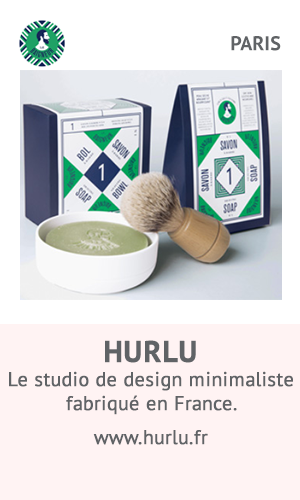
<style>
.page{position:relative;width:300px;height:500px;background:#fff3f3}
.page>*{position:absolute;margin:0}
.t1{font:20px "PTSans-Bold";color:#606366}
.t2{font:20px/24px "PTSans-Regular";color:#606366;font-weight:bold}
.t3{font:30px/36px "PTSans-Bold";color:#606366;font-weight:bold}
</style>
<div class="page">
<p class="t1" style="left:231px;top:36px;width:50px;height:15px">PARIS</p>
<p class="t2" style="left:9px;top:340px;width:284px;height:105px;text-align:center"><span class="t3">HURLU<br></span>Le studio de design minimaliste<br>fabriqué en France.<br><br>www.hurlu.fr</p>
</div>
